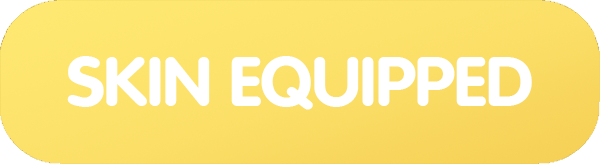
<style>
.page{position:relative;width:600px;height:164px}
.page>*{position:absolute;margin:0}
.t1{font:69.9px "Vag_Rounded-BoldCYRusbyme";color:#ffffff;scale:1.05 1}
</style>
<div class="page">
<p class="t1" style="left:67px;top:56px;width:465px;height:54px">SKIN EQUIPPED</p>
</div>
